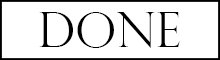
<style>
.page{position:relative;width:220px;height:60px;background:#ffffff}
.page>*{position:absolute;margin:0}
.t1{font:48px "PerpetuaTitlingMT-Light";color:#000000}
</style>
<div class="page">
<p class="t1" style="left:39px;top:12px;width:141px;height:36px">DONE</p>
</div>
